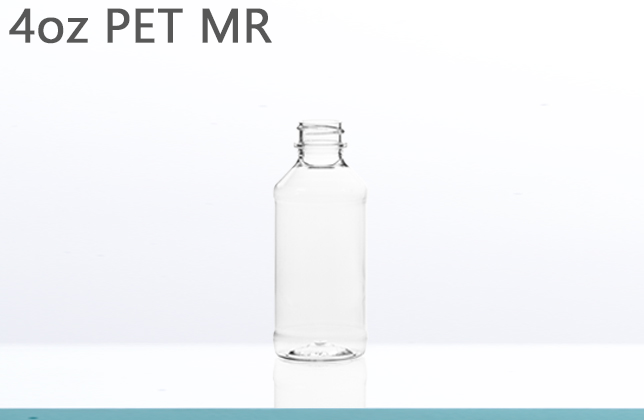
<style>
.page{position:relative;width:644px;height:420px}
.page>*{position:absolute;margin:0}
.t1{font:48px "Gadugi";color:#575757;font-weight:bold}
</style>
<div class="page">
<p class="t1" style="left:9px;top:8px;width:263px;height:36px">4oz PET MR</p>
</div>
